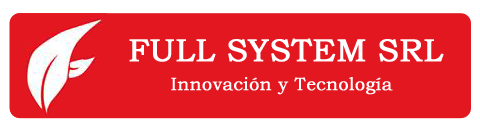
<style>
.page{position:relative;width:480px;height:130px;background:#e31720}
.page>*{position:absolute;margin:0}
.t1{font:32px "BookmanOldStyle";color:#ffffff;font-weight:bold}
.t2{font:18px "BookmanOldStyle";color:#ffffff;font-weight:bold}
</style>
<div class="page">
<p class="t1" style="left:129px;top:38px;width:315px;height:24px">FULL SYSTEM SRL</p>
<p class="t2" style="left:171px;top:77px;width:222px;height:18px">Innovación y Tecnología</p>
</div>
